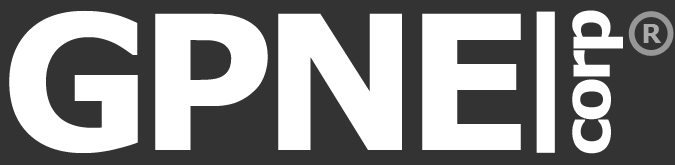
<style>
.page{position:relative;width:675px;height:165px;background:#333333}
.page>*{position:absolute;margin:0}
.t1{font:186.9px "Verdana-Bold";letter-spacing:-0.075em;color:#ffffff}
.t2{font:66.1px "Verdana-Bold";letter-spacing:-0.075em;color:#ffffff}
.t3{font:25px "Verdana-Bold";letter-spacing:-0.075em;color:#ababab}
</style>
<div class="page">
<p class="t1" style="left:9px;top:10px;width:512px;height:143px">GPNE</p>
<p class="t2" style="left:572px;top:10px;width:51px;height:144px;rotate:-90deg">corp</p>
<p class="t3" style="left:643px;top:24px;width:19px;height:19px">R</p>
</div>
